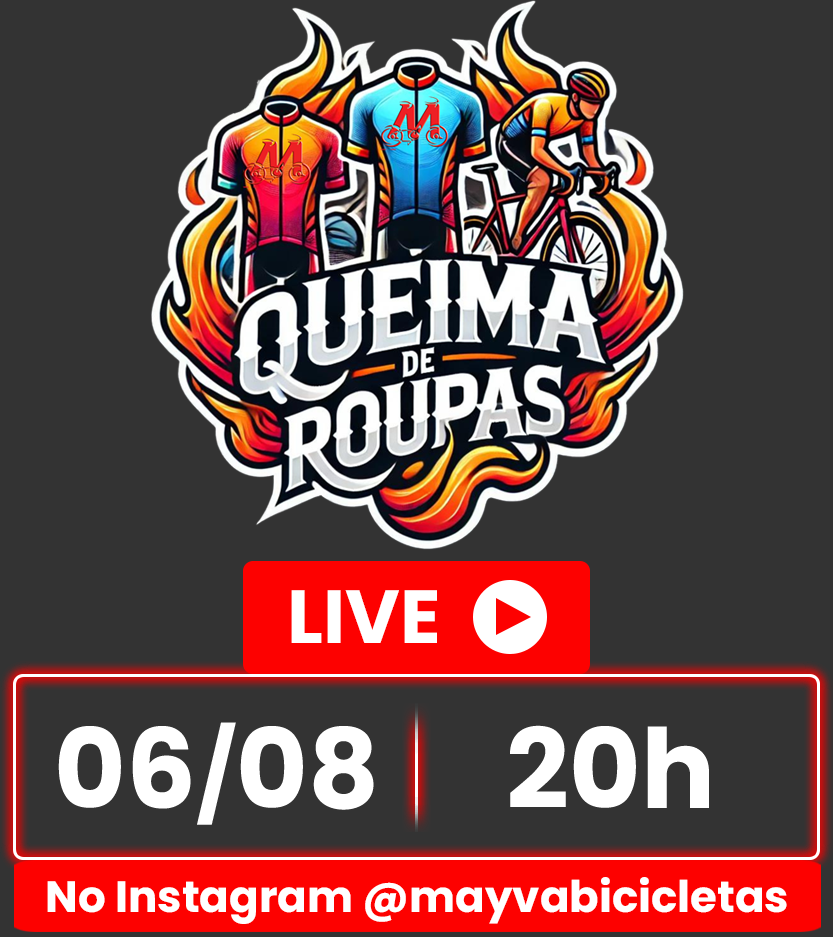
<style>
.page{position:relative;width:833px;height:937px;background:#333333}
.page>*{position:absolute;margin:0}
.t1{font:75px "Poppins-Bold";color:#ffffff}
.t2{font:110px "Poppins-Bold";color:#ffffff}
.t3{font:90px "Poppins-Bold";color:#ffffff}
.t4{font:43.6px "Poppins-Bold";color:#ffffff}
</style>
<div class="page">
<p class="t1" style="left:291px;top:590px;width:146px;height:53px">LIVE</p>
<p class="t2" style="left:58px;top:722px;width:316px;height:103px">06<span class="t3">/</span>08</p>
<p class="t2" style="left:510px;top:725px;width:199px;height:83px">20h</p>
<p class="t4" style="left:47px;top:877px;width:740px;height:47px">No Instagram @mayvabicicletas</p>
</div>
